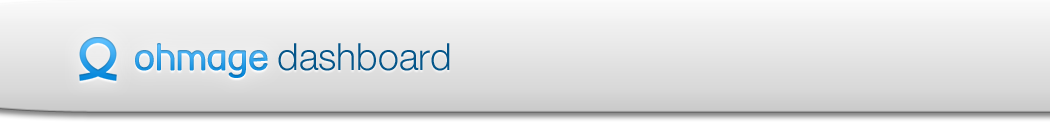
<style>
.page{position:relative;width:1050px;height:130px}
.page>*{position:absolute;margin:0}
.t1{font:37.5px "StreetCornerBold"}
.t2{font:37.5px "HelveticaNeue-Light";color:#045589}
</style>
<div class="page">
<p class="t1" style="left:135px;top:43px;width:133px;height:35px">ohmage</p>
<p class="t2" style="left:278px;top:43px;width:172px;height:28px">dashboard</p>
</div>
